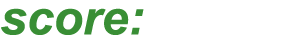
<style>
.page{position:relative;width:308px;height:42px;background:#ffffff}
.page>*{position:absolute;margin:0}
.t1{font:48px "Arial-BoldItalicMT";color:#398e35}
</style>
<div class="page">
<p class="t1" style="left:1px;top:8px;width:143px;height:27px">score:</p>
</div>
